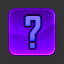
<style>
.page{position:relative;width:64px;height:64px;background:#333333}
.page>*{position:absolute;margin:0}
.t1{font:72px "AgencyFB-Bold";color:#7f70ff}
</style>
<div class="page">
<p class="t1" style="left:25px;top:16px;width:16px;height:32px">?</p>
</div>
